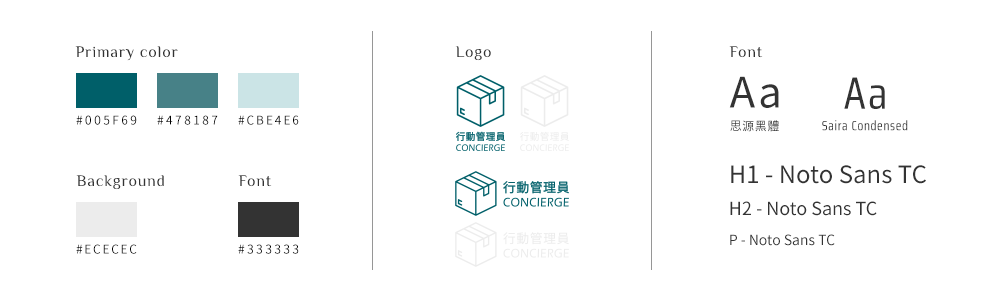
<style>
.page{position:relative;width:1000px;height:300px;background:#ffffff}
.page>*{position:absolute;margin:0}
.t1{font:16px "Philosopher-Regular";letter-spacing:0.05em;color:#333333}
.t2{font:41.9px "NotoSansCJKtc-Regular";letter-spacing:0.05em;color:#333333}
.t3{font:45.5px "SairaCondensed-Regular";letter-spacing:0.05em;color:#333333}
.t4{font:12px "NotoSansCJKtc-Regular";letter-spacing:0.05em;color:#010101;text-transform:uppercase}
.t5{font:12px "NotoSansCJKtc-Regular";letter-spacing:0.05em}
.t6{font:13.2px "SairaCondensed-Regular";letter-spacing:0.05em;color:#333333}
.t7{font:24px "NotoSansCJKtc-Regular";color:#333333}
.t8{font:18px "NotoSansCJKtc-Regular";color:#333333}
.t9{font:14px "NotoSansCJKtc-Regular";color:#333333}
</style>
<div class="page">
<p class="t1" style="left:75px;top:46px;width:103px;height:15px">Primary color</p>
<p class="t1" style="left:455px;top:46px;width:36px;height:15px">Logo</p>
<p class="t1" style="left:729px;top:46px;width:34px;height:12px">Font</p>
<p class="t2" style="left:729px;top:76px;width:50px;height:32px">Aa</p>
<p class="t3" style="left:844px;top:77px;width:41px;height:32px">Aa</p>
<p class="t4" style="left:76px;top:115px;width:61px;height:10px">#005F69</p>
<p class="t4" style="left:157px;top:115px;width:61px;height:10px">#478187</p>
<p class="t4" style="left:238px;top:115px;width:61px;height:10px">#cbe4e6</p>
<p class="t5" style="left:730px;top:120px;width:49px;height:12px">思源黑體</p>
<p class="t6" style="left:822px;top:120px;width:86px;height:11px">Saira Condensed</p>
<p class="t7" style="left:731px;top:165px;width:195px;height:19px">H1 - Noto Sans TC</p>
<p class="t1" style="left:76px;top:175px;width:88px;height:15px">Background</p>
<p class="t1" style="left:238px;top:175px;width:34px;height:12px">Font</p>
<p class="t8" style="left:730px;top:201px;width:147px;height:15px">H2 - Noto Sans TC</p>
<p class="t4" style="left:76px;top:244px;width:61px;height:10px">#ececec</p>
<p class="t4" style="left:238px;top:244px;width:61px;height:10px">#333333</p>
<p class="t9" style="left:730px;top:234px;width:105px;height:12px">P - Noto Sans TC</p>
</div>
